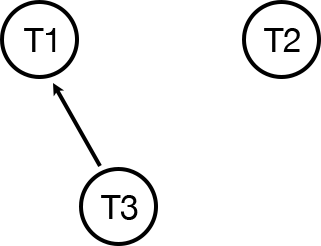
<style>
.page{position:relative;width:321px;height:246px;background:#ffffff}
.page>*{position:absolute;margin:0}
.t1{font:34px "HelveticaNeue";color:#000000}
</style>
<div class="page">
<p class="t1" style="left:24px;top:28px;width:32px;height:24px">T1</p>
<p class="t1" style="left:264px;top:28px;width:36px;height:24px">T2</p>
<p class="t1" style="left:101px;top:195px;width:37px;height:25px">T3</p>
</div>
